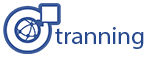
<style>
.page{position:relative;width:150px;height:60px;background:#ffffff}
.page>*{position:absolute;margin:0}
.t1{font:25px "MyriadPro-Regular";color:#26488f}
</style>
<div class="page">
<p class="t1" style="left:55px;top:27px;width:89px;height:22px">tranning</p>
</div>
